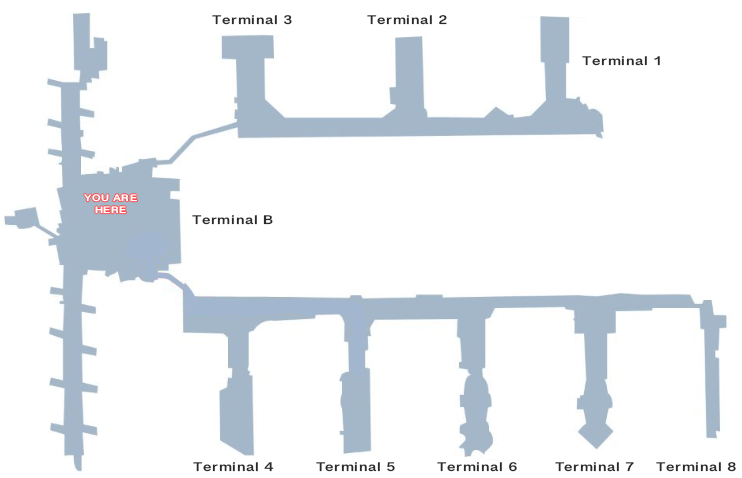
<style>
.page{position:relative;width:742px;height:478px;background:#ffffff}
.page>*{position:absolute;margin:0}
.t1{font:12.8px "GranthaSangamMN-Bold";letter-spacing:0.04em;color:#2b2b2b;scale:1.25 1}
.t2{font:9.6px/12px "GranthaSangamMN-Bold";letter-spacing:0.04em;color:#ffffff;scale:1.25 1}
</style>
<div class="page">
<p class="t1" style="left:212px;top:15px;width:80px;height:10px">Terminal 3</p>
<p class="t1" style="left:367px;top:15px;width:80px;height:10px">Terminal 2</p>
<p class="t1" style="left:582px;top:56px;width:78px;height:10px">Terminal 1</p>
<p class="t2" style="left:84px;top:194px;width:53px;height:20px;text-align:center">YOU ARE<br>HERE</p>
<p class="t1" style="left:192px;top:215px;width:81px;height:10px">Terminal B</p>
<p class="t1" style="left:193px;top:462px;width:81px;height:10px">Terminal 4</p>
<p class="t1" style="left:316px;top:462px;width:79px;height:10px">Terminal 5</p>
<p class="t1" style="left:437px;top:462px;width:80px;height:10px">Terminal 6</p>
<p class="t1" style="left:555px;top:462px;width:79px;height:10px">Terminal 7</p>
<p class="t1" style="left:656px;top:462px;width:80px;height:10px">Terminal 8</p>
</div>
